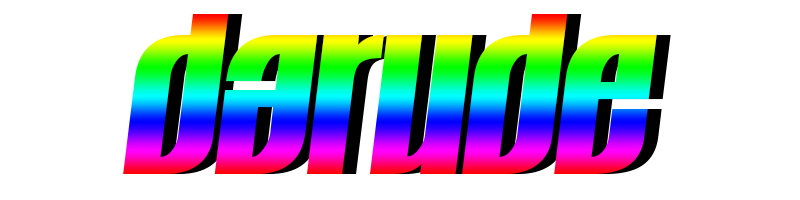
<style>
.page{position:relative;width:800px;height:200px;background:#ffffff}
.page>*{position:absolute;margin:0}
.t1{font:200px "CAVALIER-XBOLD"}
</style>
<div class="page">
<p class="t1" style="left:137px;top:14px;width:534px;height:160px">darude</p>
</div>
